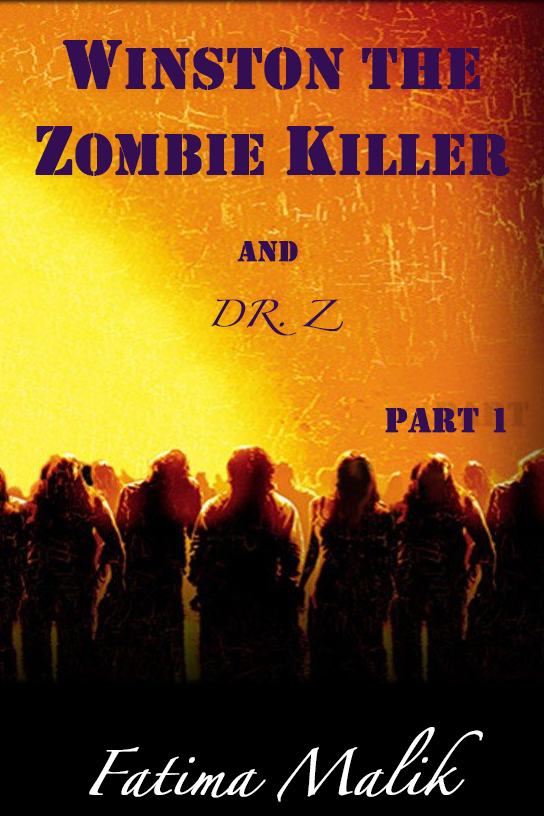
<style>
.page{position:relative;width:544px;height:816px}
.page>*{position:absolute;margin:0}
.t1{font:60px "Stencil";color:#330e52;font-weight:bold}
.t2{font:72px "Stencil";color:#330e52;font-weight:bold}
.t3{font:24px "Zapfino";color:#330e52;font-weight:bold}
.t4{font:30px "Stencil";color:#330e52;font-weight:bold}
.t5{font:36px "Stencil";color:#330e52;font-weight:bold}
.t6{font:40px "Zapfino";color:#ffffff;font-weight:bold}
</style>
<div class="page">
<p class="t1" style="left:35px;top:40px;width:475px;height:136px;text-align:center"><span class="t2">W</span>inston the <span class="t2">Z</span>ombie <span class="t2">K</span>iller</p>
<p class="t3" style="left:211px;top:241px;width:132px;height:95px;text-align:center"><span class="t4">and<br> <br></span>DR. Z</p>
<p class="t5" style="left:385px;top:408px;width:121px;height:25px">Part 1</p>
<p class="t6" style="left:89px;top:727px;width:394px;height:75px;text-align:center">Fatima Malik</p>
</div>
